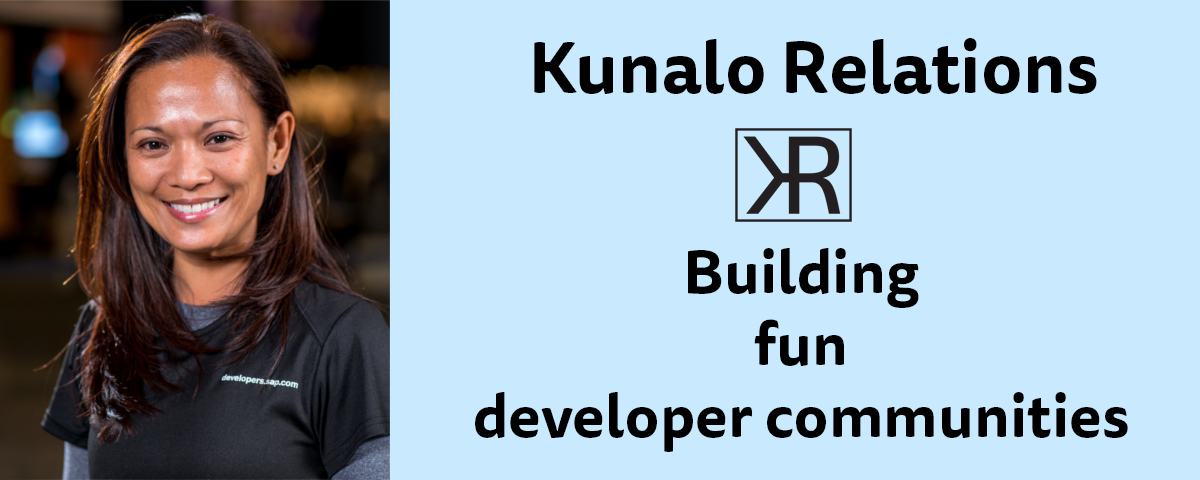
<style>
.page{position:relative;width:1200px;height:480px;background:#c9eafe}
.page>*{position:absolute;margin:0}
.t1{font:72px "TisaSansPro-Bold";color:#000000}
.t2{font:60px "TisaSansPro-Bold";color:#000000}
</style>
<div class="page">
<p class="t1" style="left:534px;top:38px;width:563px;height:56px">Kunalo Relations</p>
<p class="t2" style="left:475px;top:248px;width:653px;height:204px;text-align:center">Building <br>fun<br>developer communities</p>
</div>
